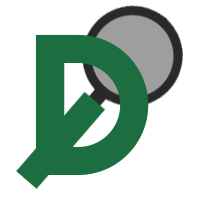
<style>
.page{position:relative;width:200px;height:200px;background:#ffffff}
.page>*{position:absolute;margin:0}
.t1{font:200px "Righteous-Regular";letter-spacing:0.04em;color:#1c6e40}
</style>
<div class="page">
<p class="t1" style="left:35px;top:34px;width:114px;height:141px">D</p>
</div>
